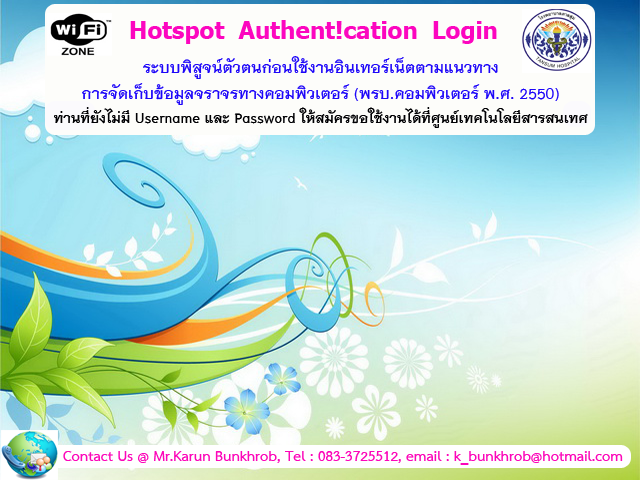
<style>
.page{position:relative;width:640px;height:480px}
.page>*{position:absolute;margin:0}
.t1{font:24px "Tahoma-Bold";color:#fc06bf}
.t2{font:22px "THNiramitAS-Bold";color:#1d06f9}
.t3{font:20px "THNiramitAS-Bold";color:#000003}
.t4{font:20px "THSarabunPSK-Bold";color:#fc06b9}
</style>
<div class="page">
<p class="t1" style="left:130px;top:20px;width:367px;height:24px">Hotspot  Authent!cation  Login</p>
<p class="t2" style="left:54px;top:56px;width:534px;height:72px;text-align:center">ระบบพิสูจน์ตัวตนก่อนใช้งานอินเทอร์เน็ตตามแนวทาง<br>การจัดเก็บข้อมูลจราจรทางคอมพิวเตอร์ (พรบ.คอมพิวเตอร์ พ.ศ. 2550)<br><span class="t3">ท่านที่ยังไม่มี Username และ Password ให้สมัครขอใช้งานได้ที่ศูนย์เทคโนโลยีสารสนเทศ</span></p>
<p class="t4" style="left:63px;top:451px;width:560px;height:14px">Contact Us @ Mr.Karun Bunkhrob, Tel : 083-3725512, email : k_bunkhrob@hotmail.com</p>
</div>
